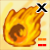
<style>
.page{position:relative;width:50px;height:50px}
.page>*{position:absolute;margin:0}
.t1{font:16px "BankGothicBT-Medium";color:#000000}
.t2{font:12.9px "Arial-Black";color:#ff7800}
.t3{font:12.9px "Arial-Black";color:#ff0000}
</style>
<div class="page">
<p class="t1" style="left:36px;top:3px;width:12px;height:9px">X</p>
<p class="t2" style="left:38px;top:38px;width:9px;height:3px">--</p>
<p class="t3" style="left:38px;top:44px;width:9px;height:3px">--</p>
</div>
